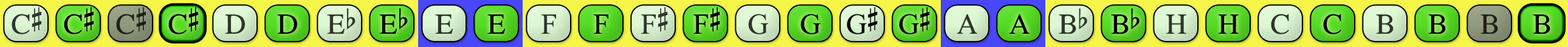
<style>
.page{position:relative;width:1568px;height:47px}
.page>*{position:absolute;margin:0}
.t1{font:29.2px "OpusChords";color:#2f352d}
.t2{font:29.2px "OpusChords";color:#000000}
.t3{font:29.2px "OpusChords";color:#1e211b}
.t4{font:29.2px "OpusChords";color:#30352d}
.t5{font:29.2px "OpusChords";color:#30362e}
.t6{font:29.2px "OpusChords";letter-spacing:-0.025em;color:#000000}
.t7{font:29.2px "OpusChords";color:#1f211b}
</style>
<div class="page">
<p class="t1" style="left:12px;top:7px;width:29px;height:28px">C#</p>
<p class="t2" style="left:64px;top:7px;width:30px;height:28px">C#</p>
<p class="t3" style="left:116px;top:7px;width:30px;height:28px">C#</p>
<p class="t2" style="left:168px;top:7px;width:30px;height:28px">C#</p>
<p class="t1" style="left:225px;top:15px;width:20px;height:19px">D</p>
<p class="t2" style="left:277px;top:15px;width:20px;height:19px">D</p>
<p class="t4" style="left:327px;top:9px;width:29px;height:25px">Eb</p>
<p class="t2" style="left:379px;top:9px;width:29px;height:25px">Eb</p>
<p class="t5" style="left:435px;top:15px;width:18px;height:19px">E</p>
<p class="t2" style="left:487px;top:15px;width:18px;height:19px">E</p>
<p class="t5" style="left:541px;top:15px;width:15px;height:19px">F</p>
<p class="t2" style="left:593px;top:15px;width:15px;height:19px">F</p>
<p class="t4" style="left:641px;top:7px;width:27px;height:27px">F#</p>
<p class="t2" style="left:693px;top:7px;width:27px;height:27px">F#</p>
<p class="t1" style="left:748px;top:14px;width:20px;height:21px">G</p>
<p class="t2" style="left:800px;top:14px;width:20px;height:21px">G</p>
<p class="t6" style="left:847px;top:7px;width:31px;height:28px">G#</p>
<p class="t6" style="left:899px;top:7px;width:31px;height:28px">G#</p>
<p class="t1" style="left:957px;top:14px;width:20px;height:20px">A</p>
<p class="t2" style="left:1009px;top:14px;width:21px;height:20px">A</p>
<p class="t4" style="left:1059px;top:9px;width:28px;height:25px">Bb</p>
<p class="t2" style="left:1111px;top:9px;width:29px;height:25px">Bb</p>
<p class="t4" style="left:1166px;top:15px;width:20px;height:19px">H</p>
<p class="t2" style="left:1218px;top:15px;width:21px;height:19px">H</p>
<p class="t5" style="left:1271px;top:14px;width:18px;height:21px">C</p>
<p class="t2" style="left:1323px;top:14px;width:18px;height:21px">C</p>
<p class="t4" style="left:1376px;top:15px;width:18px;height:19px">B</p>
<p class="t2" style="left:1428px;top:15px;width:18px;height:19px">B</p>
<p class="t7" style="left:1480px;top:15px;width:18px;height:19px">B</p>
<p class="t2" style="left:1533px;top:15px;width:17px;height:19px">B</p>
</div>
